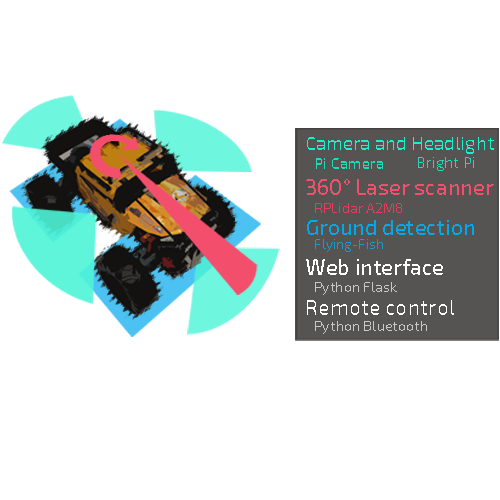
<style>
.page{position:relative;width:500px;height:500px;background:#ffffff}
.page>*{position:absolute;margin:0}
.t1{font:18.7px "Exo2-Medium";color:#18f1cb}
.t2{font:16px "Exo2-Medium";color:#1fdab9}
.t3{font:15.1px "Exo2-Medium";color:#1fdab9}
.t4{font:22.3px "Exo2-Medium";color:#f44e6d}
.t5{font:14.2px "Exo2-Medium";color:#e83e5e}
.t6{font:21.1px "Exo2-Medium";color:#00a8ec}
.t7{font:14.1px "Exo2-Medium";color:#1c9acd}
.t8{font:22px "Exo2-Medium";color:#ffffff}
.t9{font:14.2px "Exo2-Medium";color:#c8c9c9}
.t10{font:21.5px "Exo2-Medium";color:#ffffff}
</style>
<div class="page">
<p class="t1" style="left:307px;top:137px;width:187px;height:17px">Camera and Headlight</p>
<p class="t2" style="left:316px;top:158px;width:67px;height:11px">Pi Camera</p>
<p class="t3" style="left:418px;top:157px;width:56px;height:14px">Bright Pi</p>
<p class="t4" style="left:306px;top:179px;width:188px;height:16px">360° Laser scanner</p>
<p class="t5" style="left:315px;top:203px;width:87px;height:10px">RPLidar A2M8</p>
<p class="t6" style="left:307px;top:220px;width:167px;height:15px">Ground detection</p>
<p class="t7" style="left:315px;top:239px;width:68px;height:13px">Flying-Fish</p>
<p class="t8" style="left:306px;top:259px;width:137px;height:16px">Web interface</p>
<p class="t9" style="left:315px;top:282px;width:82px;height:13px">Python Flask</p>
<p class="t10" style="left:307px;top:300px;width:147px;height:15px">Remote control</p>
<p class="t9" style="left:315px;top:321px;width:112px;height:13px">Python Bluetooth</p>
</div>
